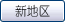
<style>
.page{position:relative;width:65px;height:22px}
.page>*{position:absolute;margin:0}
.t1{font:12.6px "YouYuan";scale:0.94 1}
</style>
<div class="page">
<p class="t1" style="left:15px;top:4px;width:35px;height:13px">新地区</p>
</div>
